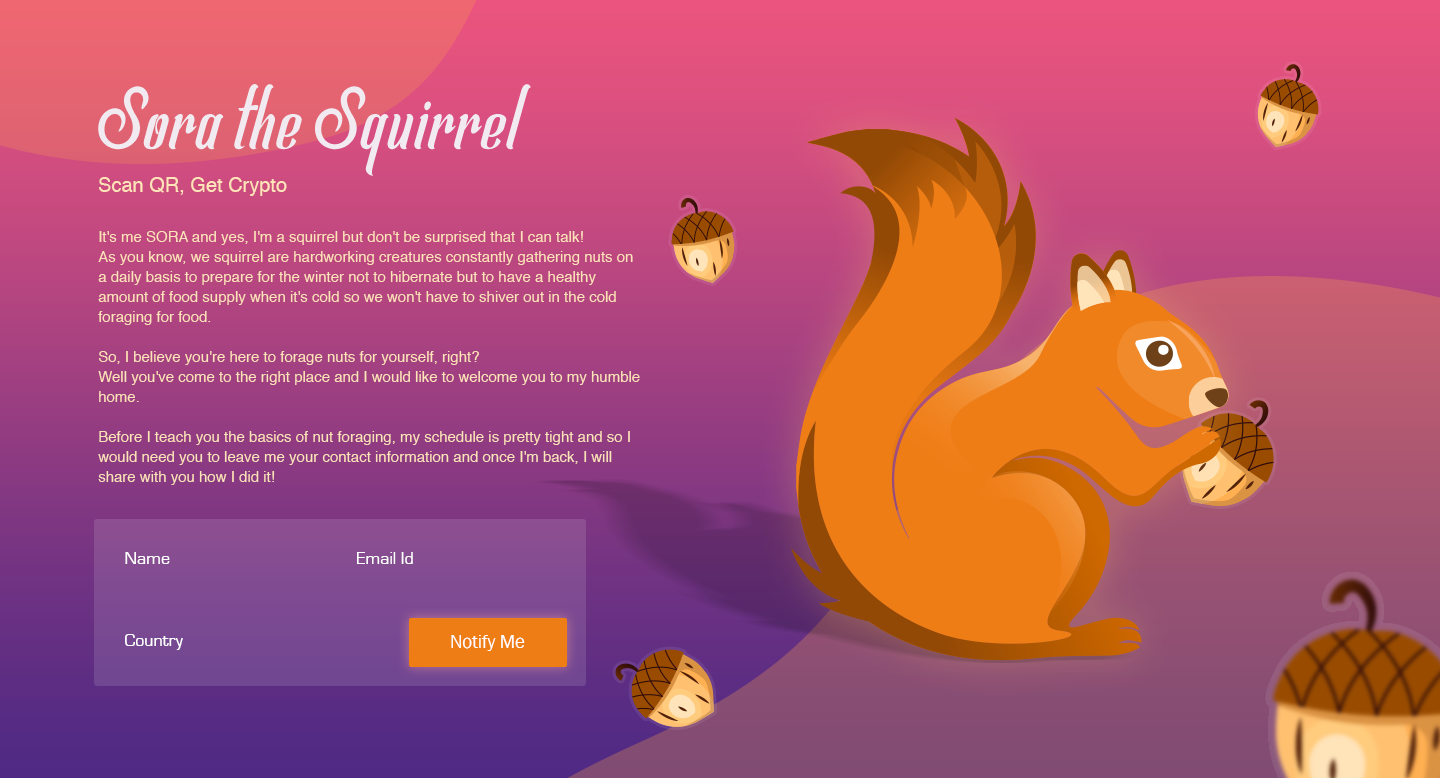
<style>
.page{position:relative;width:1440px;height:778px}
.page>*{position:absolute;margin:0}
.t1{font:20px "Helvetica";color:#ffe3b9}
.t2{font:15px/20px "Helvetica";color:#ffe3b9}
.t3{font:18px "EurostileRegular";color:#ffffff}
.t4{font:18.6px "FranklinGothic-Book";color:#ffffff}
</style>
<div class="page">
<p class="t1" style="left:99px;top:177px;width:188px;height:19px">Scan QR, Get Crypto</p>
<p class="t2" style="left:98px;top:231px;width:542px;height:254px;text-align:right">It's me SORA and yes, I'm a squirrel but don't be surprised that I can talk!<br>As you know, we squirrel are hardworking creatures constantly gathering nuts on a daily basis to prepare for the winter not to hibernate but to have a healthy amount of food supply when it's cold so we won't have to shiver out in the cold foraging for food.<br><br>So, I believe you're here to forage nuts for yourself, right?<br>Well you've come to the right place and I would like to welcome you to my humble home.<br><br>Before I teach you the basics of nut foraging, my schedule is pretty tight and so I would need you to leave me your contact information and once I'm back, I will share with you how I did it!</p>
<p class="t3" style="left:125px;top:552px;width:45px;height:12px">Name</p>
<p class="t3" style="left:357px;top:552px;width:56px;height:12px">Email Id</p>
<p class="t3" style="left:125px;top:634px;width:58px;height:16px">Country</p>
<p class="t4" style="left:451px;top:635px;width:74px;height:16px">Notify Me</p>
</div>
